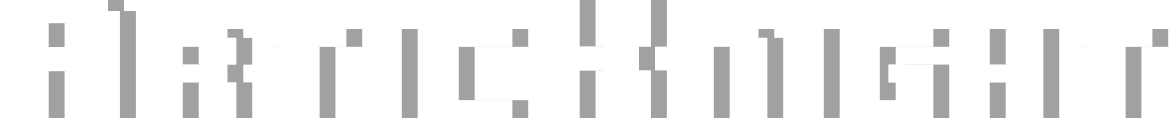
<style>
.page{position:relative;width:1174px;height:118px;background:#ffffff}
.page>*{position:absolute;margin:0}
.t1{font:107px "8BITWONDERNominal";letter-spacing:0.025em;color:#ffffff}
.t2{font:142.6px "8BITWONDERNominal";letter-spacing:0.025em;color:#ffffff}
</style>
<div class="page">
<p class="t1" style="left:1px;top:0px;width:1152px;height:118px"><span class="t2">A</span>rtic<span class="t2">k</span>night</p>
</div>
